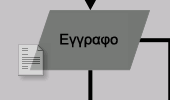
<style>
.page{position:relative;width:170px;height:100px;background:#c6c3c6}
.page>*{position:absolute;margin:0}
.t1{font:14.7px "ArialMT";color:#000000}
</style>
<div class="page">
<p class="t1" style="left:60px;top:33px;width:58px;height:15px">Εγγραφο</p>
</div>
